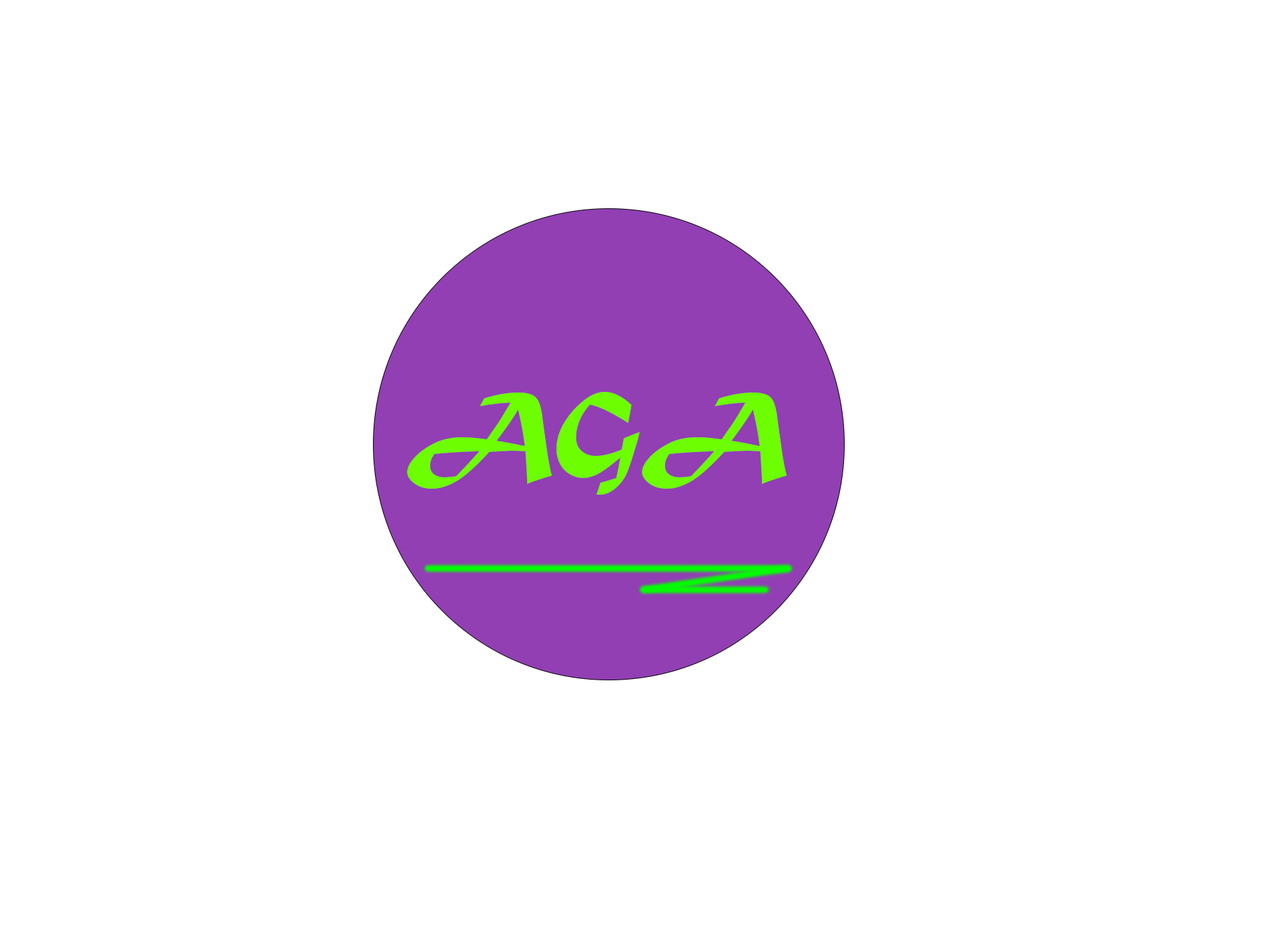
<style>
.page{position:relative;width:1261px;height:946px;background:#ffffff}
.page>*{position:absolute;margin:0}
.t1{font:111.2px "MaturaMTScriptCapitals";color:#6dff01}
</style>
<div class="page">
<p class="t1" style="left:407px;top:392px;width:380px;height:102px">AGA</p>
</div>
